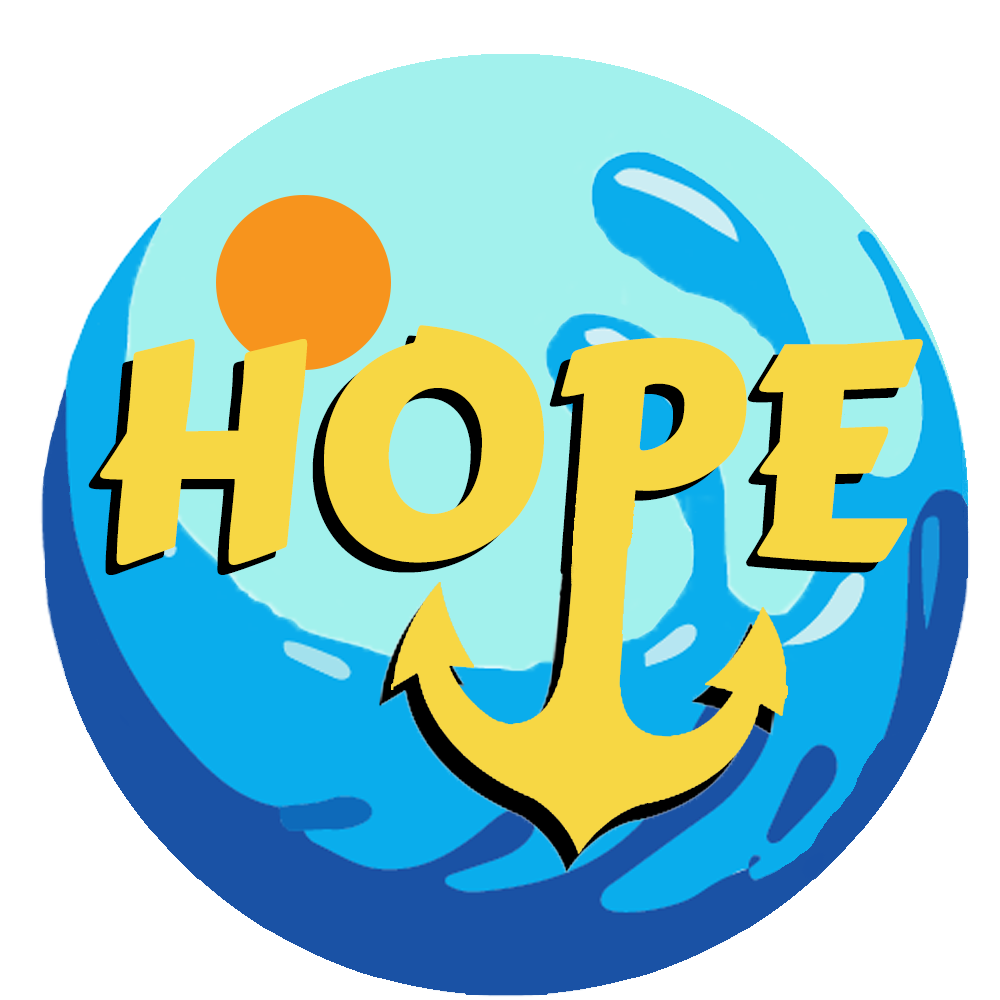
<style>
.page{position:relative;width:1000px;height:1000px;background:#ffffff}
.page>*{position:absolute;margin:0}
.t1{font:300px "CarterOne";color:#f7d744}
</style>
<div class="page">
<p class="t1" style="left:100px;top:325px;width:823px;height:240px">HOPE</p>
<p class="t1" style="left:88px;top:335px;width:824px;height:240px">HOPE</p>
</div>
